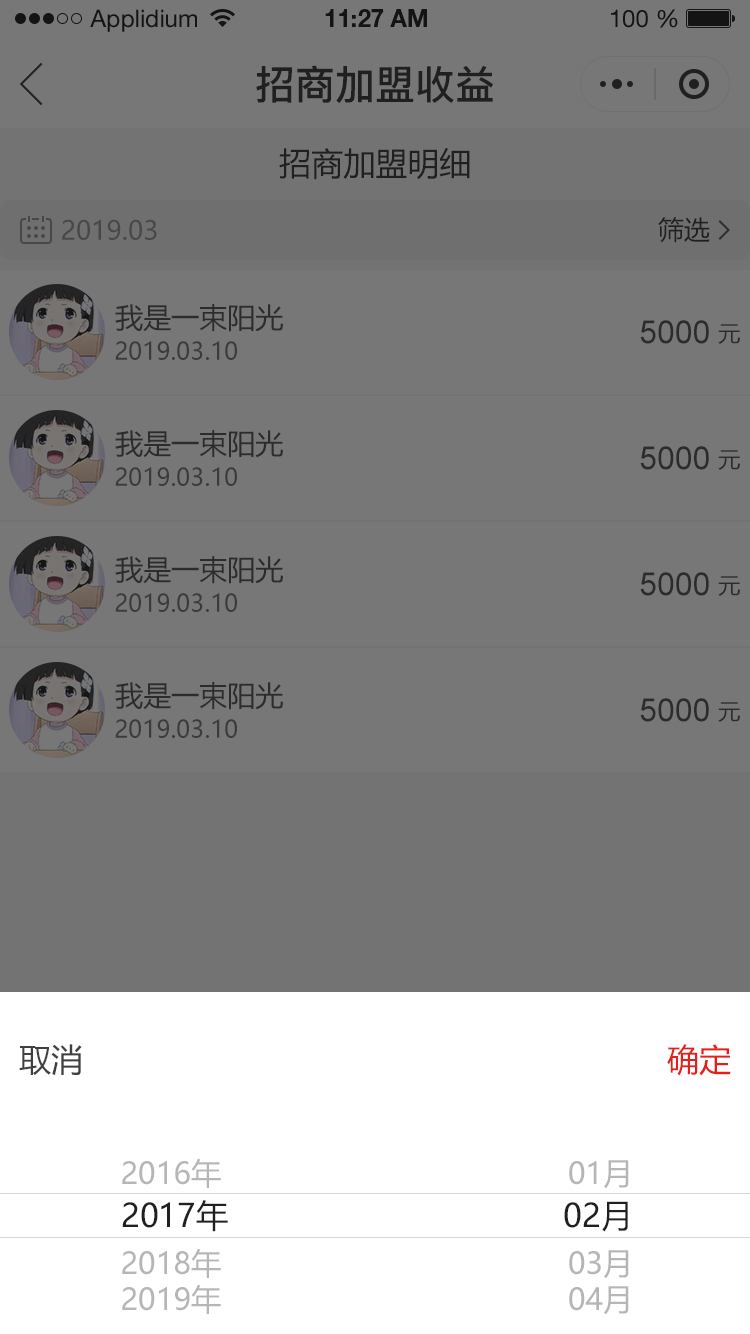
<style>
.page{position:relative;width:750px;height:1334px;background:#777777}
.page>*{position:absolute;margin:0}
.t1{font:24px "HelveticaNeueLTStd-Roman";color:#000000}
.t2{font:24px "HelveticaNeueLTStd-Bd";color:#000000}
.t3{font:40px "PingFang-SC-Bold";color:#202020;text-transform:uppercase}
.t4{font:32px "MicrosoftYaHei";color:#202020;text-transform:uppercase}
.t5{font:26px "MicrosoftYaHei";color:#484848;text-transform:uppercase}
.t6{font:26px "MicrosoftYaHei";color:#202020;text-transform:uppercase}
.t7{font:28px "MicrosoftYaHei";color:#404040;text-transform:uppercase}
.t8{font:32px "ArialMT";color:#404040;text-transform:uppercase}
.t9{font:22px "MicrosoftYaHei";color:#404040;text-transform:uppercase}
.t10{font:24px "MicrosoftYaHei";color:#3b3b3b;text-transform:uppercase}
.t11{font:32px "MicrosoftYaHei";color:#404040;text-transform:uppercase}
.t12{font:32px "MicrosoftYaHei";color:#e61f18;text-transform:uppercase}
.t13{font:30px "MicrosoftYaHei";color:#b6b6b6;text-transform:uppercase}
</style>
<div class="page">
<p class="t1" style="left:90px;top:9px;width:107px;height:23px">Applidium</p>
<p class="t2" style="left:325px;top:9px;width:102px;height:18px">11:27 AM</p>
<p class="t1" style="left:611px;top:9px;width:67px;height:19px">100 %</p>
<p class="t3" style="left:256px;top:65px;width:238px;height:38px">招商加盟收益</p>
<p class="t4" style="left:279px;top:147px;width:191px;height:33px">招商加盟明细</p>
<p class="t5" style="left:62px;top:219px;width:95px;height:21px">2019.03</p>
<p class="t6" style="left:658px;top:217px;width:52px;height:26px">筛选</p>
<p class="t7" style="left:115px;top:304px;width:168px;height:28px">我是一束阳光</p>
<p class="t8" style="left:640px;top:320px;width:69px;height:24px">5000</p>
<p class="t9" style="left:718px;top:324px;width:22px;height:20px">元</p>
<p class="t10" style="left:115px;top:341px;width:122px;height:19px">2019.03.10</p>
<p class="t7" style="left:115px;top:430px;width:168px;height:28px">我是一束阳光</p>
<p class="t8" style="left:640px;top:446px;width:69px;height:24px">5000</p>
<p class="t9" style="left:718px;top:450px;width:22px;height:20px">元</p>
<p class="t10" style="left:115px;top:467px;width:122px;height:19px">2019.03.10</p>
<p class="t7" style="left:115px;top:556px;width:168px;height:28px">我是一束阳光</p>
<p class="t8" style="left:640px;top:572px;width:69px;height:24px">5000</p>
<p class="t9" style="left:718px;top:576px;width:22px;height:20px">元</p>
<p class="t10" style="left:115px;top:593px;width:122px;height:19px">2019.03.10</p>
<p class="t7" style="left:115px;top:682px;width:168px;height:28px">我是一束阳光</p>
<p class="t8" style="left:640px;top:698px;width:69px;height:24px">5000</p>
<p class="t9" style="left:718px;top:702px;width:22px;height:20px">元</p>
<p class="t10" style="left:115px;top:719px;width:122px;height:19px">2019.03.10</p>
<p class="t11" style="left:19px;top:1044px;width:63px;height:31px">取消</p>
<p class="t12" style="left:667px;top:1044px;width:64px;height:32px">确定</p>
<p class="t13" style="left:122px;top:1158px;width:99px;height:30px">2016年</p>
<p class="t13" style="left:569px;top:1160px;width:60px;height:29px">01月</p>
<p class="t4" style="left:122px;top:1200px;width:106px;height:32px">2017年</p>
<p class="t4" style="left:564px;top:1201px;width:64px;height:31px">02月</p>
<p class="t13" style="left:122px;top:1248px;width:99px;height:30px">2018年</p>
<p class="t13" style="left:569px;top:1250px;width:60px;height:29px">03月</p>
<p class="t13" style="left:122px;top:1284px;width:99px;height:30px">2019年</p>
<p class="t13" style="left:569px;top:1286px;width:60px;height:29px">04月</p>
</div>
